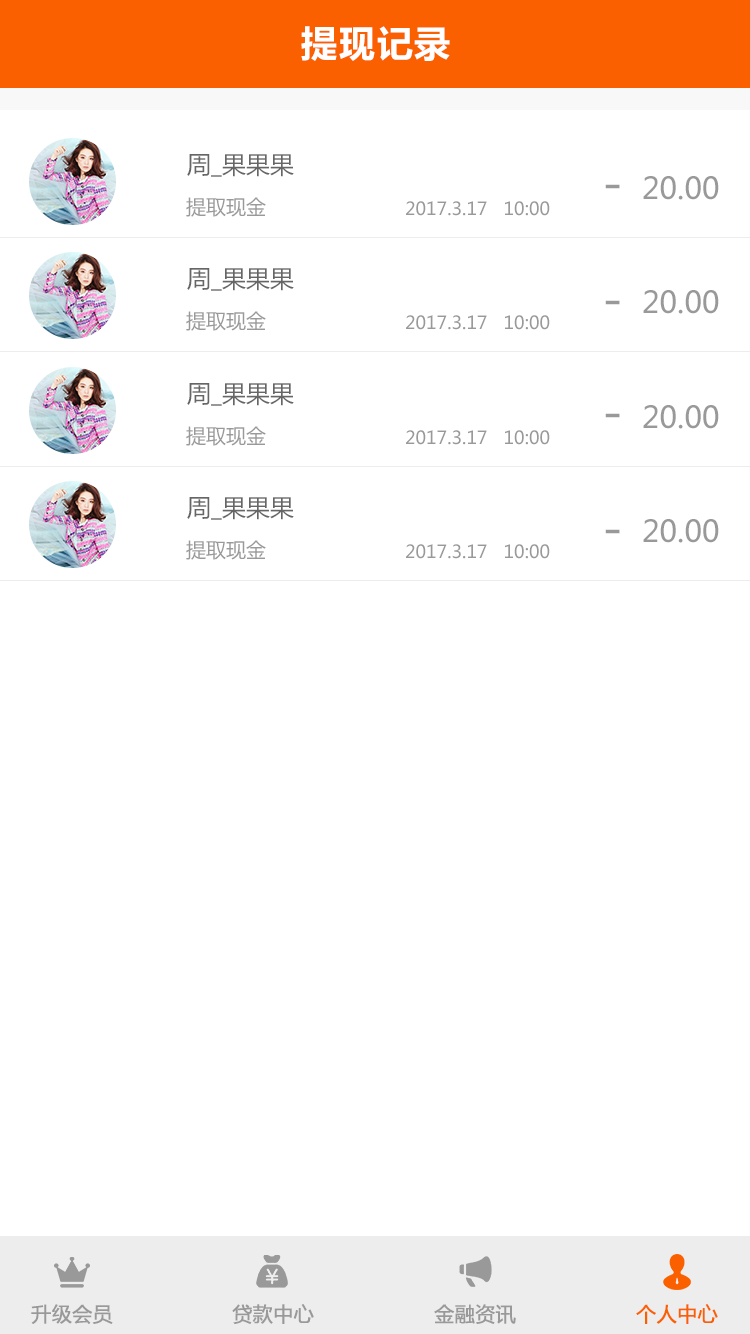
<style>
.page{position:relative;width:750px;height:1334px;background:#ffffff}
.page>*{position:absolute;margin:0}
.t1{font:36px "MicrosoftYaHei-Bold";letter-spacing:0.05em;color:#ffffff}
.t2{font:24px "MicrosoftYaHei";color:#666666}
.t3{font:48px "MicrosoftYaHei";color:#999999}
.t4{font:30px "MicrosoftYaHei";color:#999999}
.t5{font:20px "MicrosoftYaHei";color:#999999}
.t6{font:18px "MicrosoftYaHei";color:#999999}
.t7{font:20px "MicrosoftYaHei";color:#999999;font-weight:bold}
.t8{font:20px "MicrosoftYaHei";color:#fb6000;font-weight:bold}
</style>
<div class="page">
<p class="t1" style="left:301px;top:26px;width:149px;height:35px">提现记录</p>
<p class="t2" style="left:187px;top:154px;width:107px;height:23px">周_果果果</p>
<p class="t3" style="left:605px;top:184px;width:15px;height:5px">-</p>
<p class="t4" style="left:643px;top:176px;width:76px;height:24px">20.00</p>
<p class="t5" style="left:186px;top:197px;width:80px;height:20px">提取现金</p>
<p class="t6" style="left:406px;top:201px;width:144px;height:15px">2017.3.17   10:00</p>
<p class="t2" style="left:187px;top:268px;width:107px;height:23px">周_果果果</p>
<p class="t4" style="left:643px;top:290px;width:76px;height:24px">20.00</p>
<p class="t3" style="left:605px;top:300px;width:15px;height:5px">-</p>
<p class="t5" style="left:186px;top:311px;width:80px;height:20px">提取现金</p>
<p class="t6" style="left:406px;top:315px;width:144px;height:15px">2017.3.17   10:00</p>
<p class="t2" style="left:187px;top:383px;width:107px;height:23px">周_果果果</p>
<p class="t3" style="left:605px;top:413px;width:15px;height:5px">-</p>
<p class="t4" style="left:643px;top:405px;width:76px;height:24px">20.00</p>
<p class="t5" style="left:186px;top:426px;width:80px;height:20px">提取现金</p>
<p class="t6" style="left:406px;top:430px;width:144px;height:15px">2017.3.17   10:00</p>
<p class="t2" style="left:187px;top:497px;width:107px;height:23px">周_果果果</p>
<p class="t4" style="left:643px;top:519px;width:76px;height:24px">20.00</p>
<p class="t3" style="left:605px;top:529px;width:15px;height:5px">-</p>
<p class="t5" style="left:186px;top:540px;width:80px;height:20px">提取现金</p>
<p class="t6" style="left:406px;top:544px;width:144px;height:15px">2017.3.17   10:00</p>
<p class="t7" style="left:31px;top:1304px;width:82px;height:20px">升级会员</p>
<p class="t7" style="left:232px;top:1304px;width:82px;height:20px">贷款中心</p>
<p class="t7" style="left:434px;top:1304px;width:82px;height:20px">金融资讯</p>
<p class="t8" style="left:636px;top:1304px;width:82px;height:20px">个人中心</p>
</div>
